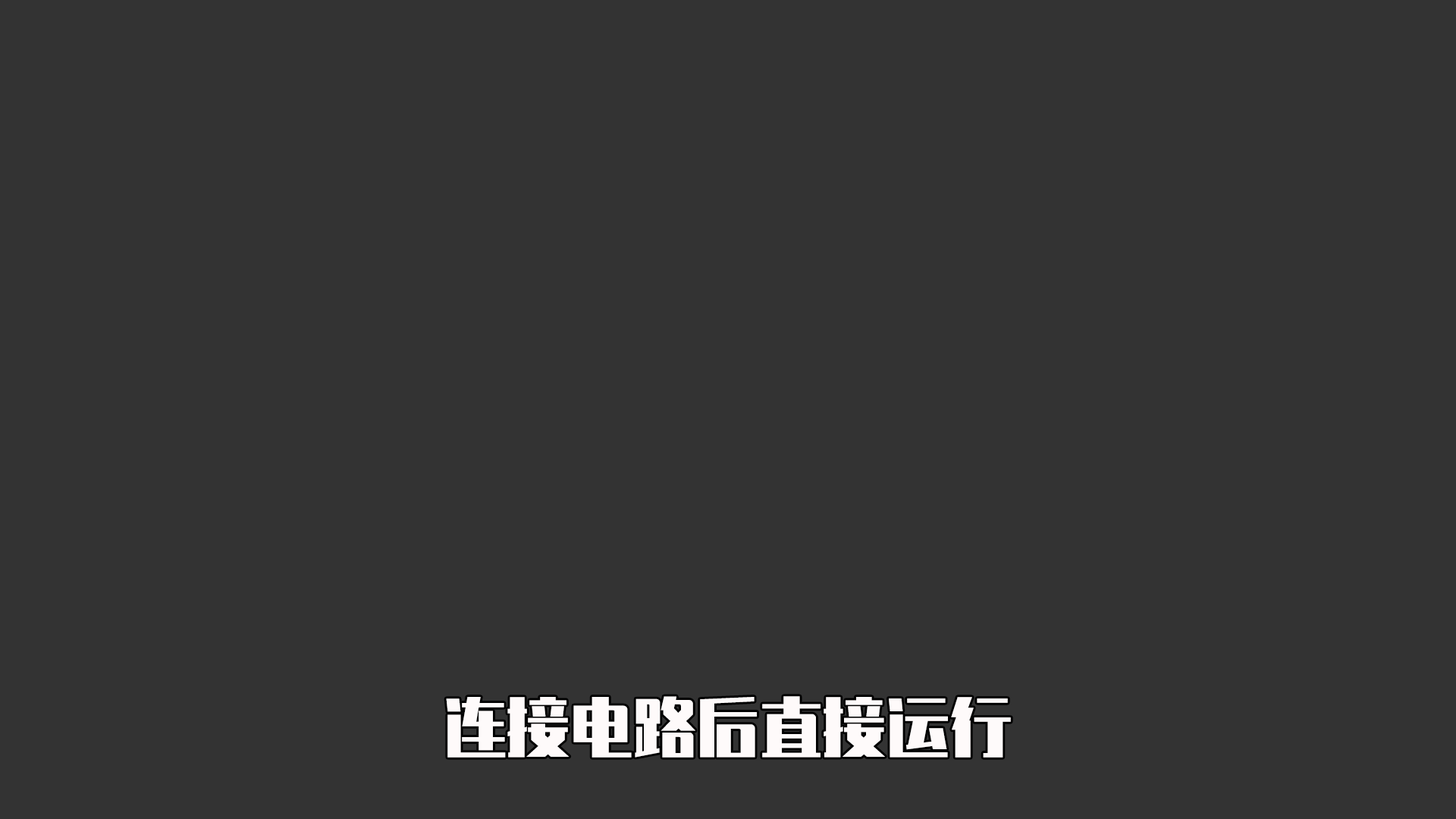
<style>
.page{position:relative;width:1456px;height:819px;background:#333333}
.page>*{position:absolute;margin:0}
.t1{font:63.2px "ZhenyanGB-Regular";color:#fefafa}
</style>
<div class="page">
<p class="t1" style="left:446px;top:696px;width:565px;height:62px">连接电路后直接运行</p>
</div>
